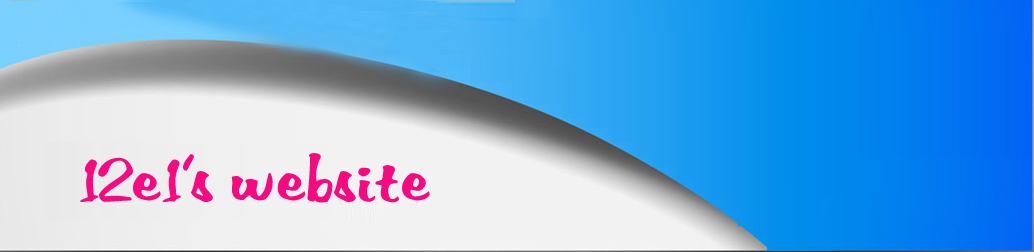
<style>
.page{position:relative;width:1034px;height:252px}
.page>*{position:absolute;margin:0}
.t1{font:72px "VNI-Thufap3";color:#f70a7f}
</style>
<div class="page">
<p class="t1" style="left:80px;top:153px;width:350px;height:50px">12e1’s website</p>
</div>
